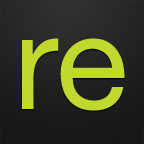
<style>
.page{position:relative;width:144px;height:144px}
.page>*{position:absolute;margin:0}
.t1{font:132.8px "HelveticaNeue";color:#c1d82f}
</style>
<div class="page">
<p class="t1" style="left:22px;top:38px;width:103px;height:73px">re</p>
</div>
